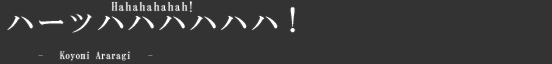
<style>
.page{position:relative;width:552px;height:64px;background:#333333}
.page>*{position:absolute;margin:0}
.t1{font:12px/11px "HGMinchoB";letter-spacing:0.075em;color:#ffffff}
.t2{font:28px/11px "HGMinchoB";letter-spacing:0.1em;color:#ffffff}
.t3{font:23.4px/11px "HGMinchoB";letter-spacing:0.1em;color:#ffffff;scale:1.11 1}
.t4{font:28px/11px "HGMinchoB";color:#ffffff}
.t5{font:10px "HGMinchoB";letter-spacing:0.01em;color:#ffffff}
</style>
<div class="page">
<p class="t1" style="left:7px;top:1px;width:288px;height:32px;text-align:center">Hahahahahah!  <br><br><span class="t2">ハー</span><span class="t3">ツ</span><span class="t2">ハハハハハ</span><span class="t4">ハ</span><span class="t2">！</span></p>
<p class="t5" style="left:60px;top:51px;width:70px;height:10px">Koyomi Araragi</p>
</div>
